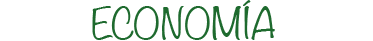
<style>
.page{position:relative;width:373px;height:41px;background:#ffffff}
.page>*{position:absolute;margin:0}
.t1{font:38.6px "Noteworthy-Light";color:#1e6a2e}
</style>
<div class="page">
<p class="t1" style="left:92px;top:0px;width:183px;height:40px">ECONOMÍA</p>
</div>
